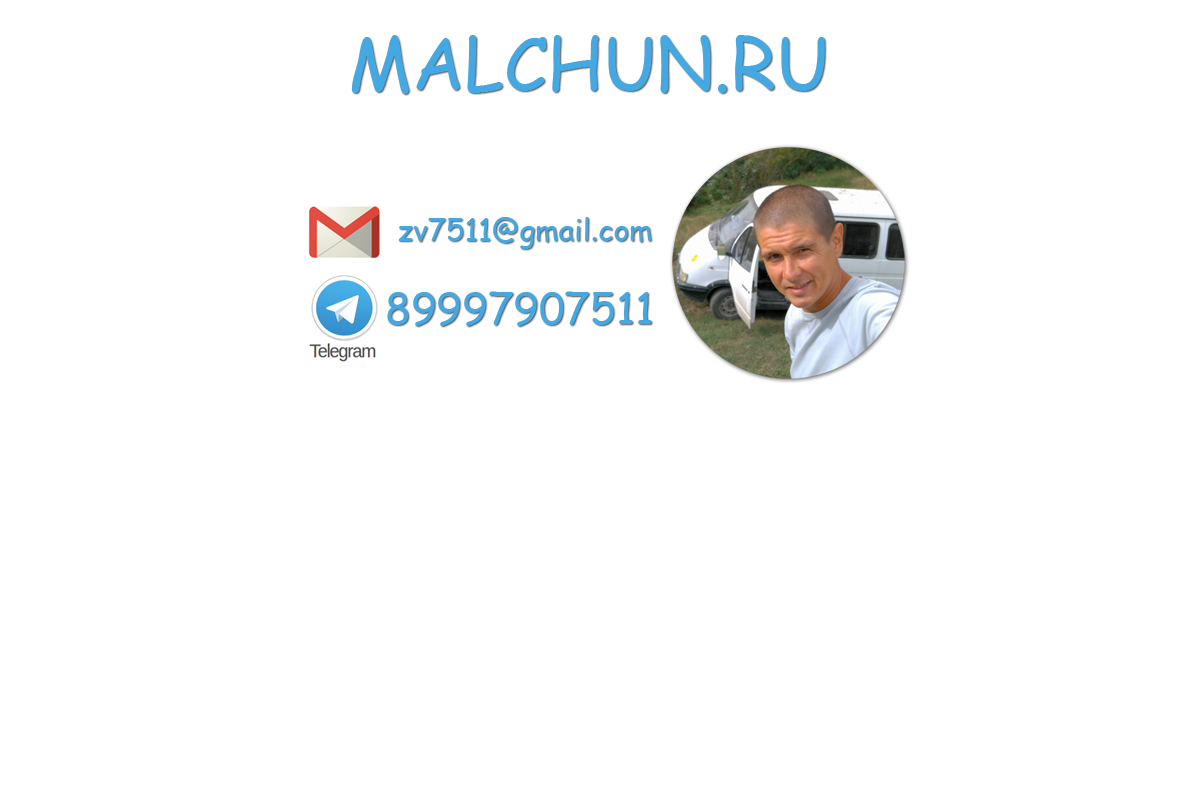
<style>
.page{position:relative;width:1200px;height:800px;background:#ffffff}
.page>*{position:absolute;margin:0}
.t1{font:72px "ComicSansMS";color:#44a8e3}
.t2{font:30px "ComicSansMS";color:#44a8e3}
.t3{font:42px "ComicSansMS";color:#44a8e3}
</style>
<div class="page">
<p class="t1" style="left:351px;top:35px;width:474px;height:59px">MALCHUN.RU</p>
<p class="t2" style="left:398px;top:217px;width:254px;height:32px">zv7511@gmail.com</p>
<p class="t3" style="left:387px;top:291px;width:265px;height:35px">89997907511</p>
</div>
